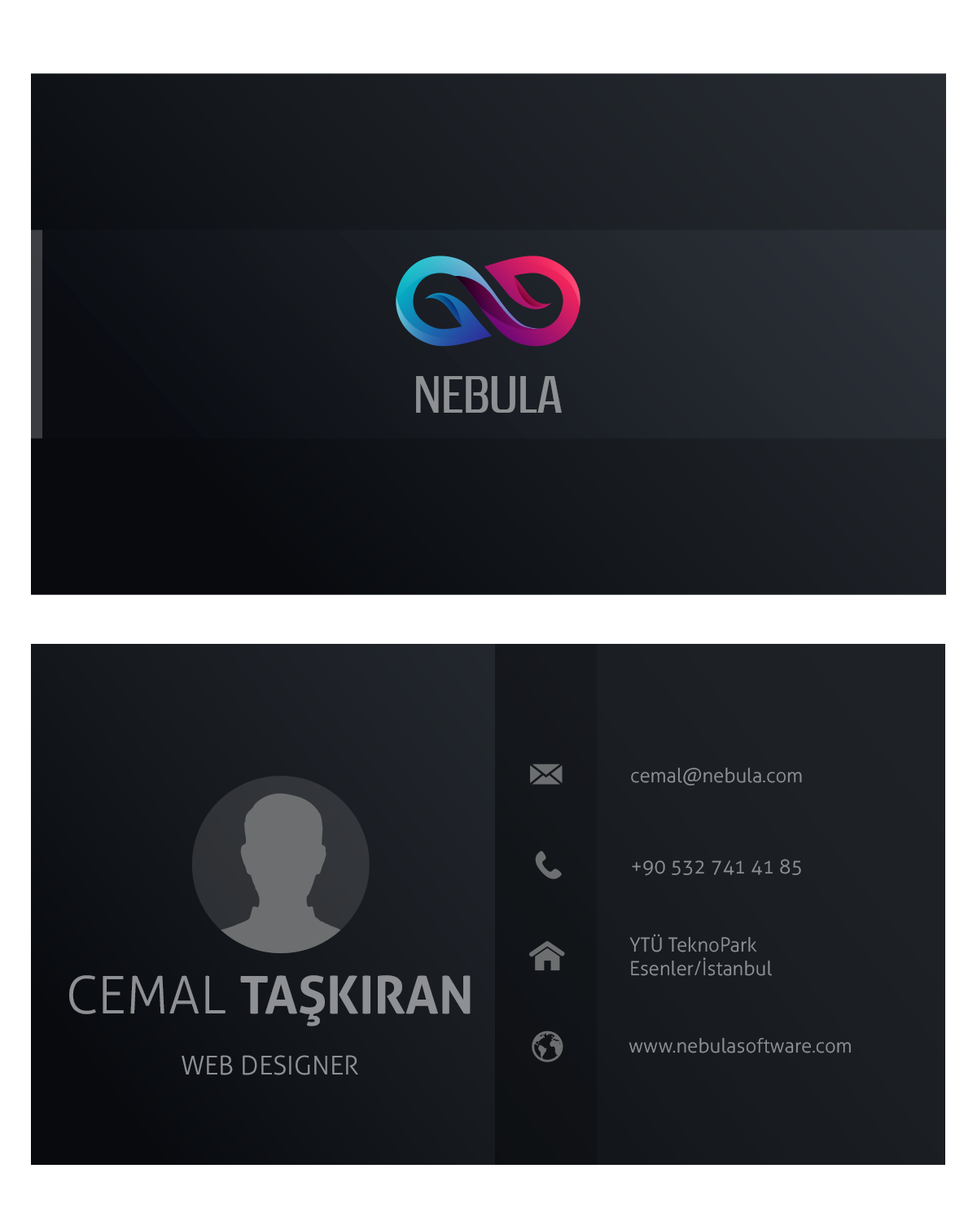
<style>
.page{position:relative;width:977px;height:1221px;background:#ffffff}
.page>*{position:absolute;margin:0}
.t1{font:52.1px "ZrnicRg-Regular";color:#8e9093}
.t2{font:19.5px "Aller-Light";color:#8e9093}
.t3{font:52.1px "Aller-Bold";color:#8e9093}
.t4{font:52.1px "Aller-Light";color:#8e9093}
.t5{font:26px "Aller-Light";color:#8e9093}
</style>
<div class="page">
<p class="t1" style="left:416px;top:376px;width:146px;height:37px">NEBULA</p>
<p class="t2" style="left:631px;top:768px;width:171px;height:17px">cemal@nebula.com</p>
<p class="t2" style="left:632px;top:859px;width:169px;height:17px">+90 532 741 41 85</p>
<p class="t2" style="left:629px;top:934px;width:143px;height:42px">YTÜ TeknoPark<br>Esenler/İstanbul</p>
<p class="t3" style="left:69px;top:975px;width:401px;height:51px"><span class="t4">CEMAL </span>TAŞKIRAN</p>
<p class="t2" style="left:628px;top:1038px;width:223px;height:15px">www.nebulasoftware.com</p>
<p class="t5" style="left:182px;top:1055px;width:176px;height:20px">WEB DESIGNER</p>
</div>
